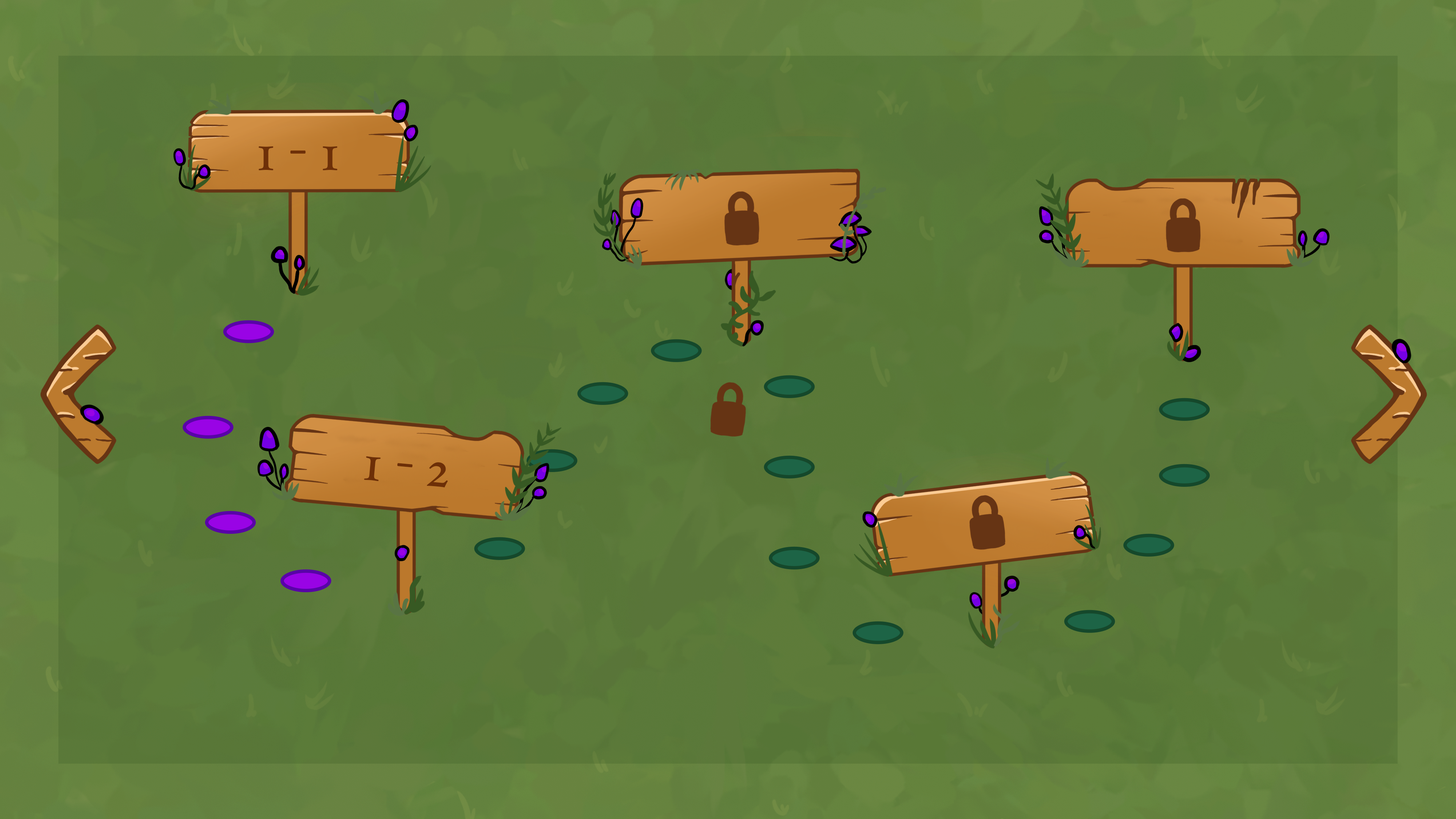
<style>
.page{position:relative;width:1456px;height:819px}
.page>*{position:absolute;margin:0}
.t1{font:53px "HoeflerText";color:#6e3008}
.t2{font:53px "HoeflerText";color:#6d2f07}
</style>
<div class="page">
<p class="t1" style="left:259px;top:146px;width:78px;height:24px">1 - 1</p>
<p class="t2" style="left:364px;top:456px;width:84px;height:32px;rotate:5deg">1 - 2</p>
</div>
